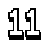
<style>
.page{position:relative;width:48px;height:48px;background:#ffffff}
.page>*{position:absolute;margin:0}
.t1{font:36px "KarmaFuture-Regular";color:#010101}
</style>
<div class="page">
<p class="t1" style="left:8px;top:8px;width:33px;height:32px">11</p>
</div>
